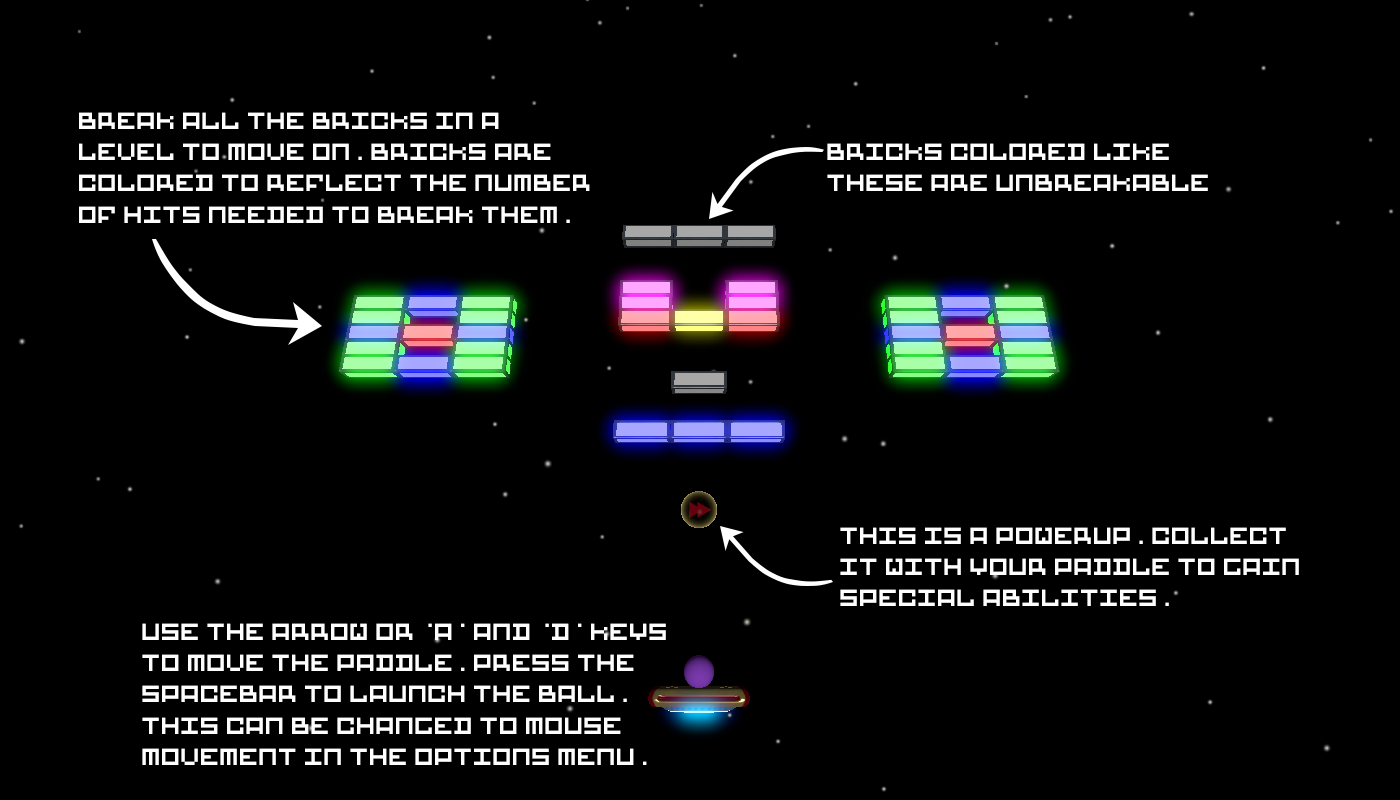
<style>
.page{position:relative;width:1400px;height:800px;background:#000000}
.page>*{position:absolute;margin:0}
.t1{font:26px "BIGBLOCKS";color:#fefefe}
</style>
<div class="page">
<p class="t1" style="left:79px;top:112px;width:511px;height:111px">BREAK ALL THE BRICKS IN A LEVEL TO MOVE ON. BRICKS ARE COLORED TO REFLECT THE NUMBER OF HITS NEEDED TO BREAK THEM.</p>
<p class="t1" style="left:827px;top:143px;width:381px;height:48px">BRICKS COLORED LIKE THESE ARE UNBREAKABLE</p>
<p class="t1" style="left:840px;top:527px;width:459px;height:79px">THIS IS A POWERUP. COLLECT IT WITH YOUR PADDLE TO GAIN SPECIAL ABILITIES.</p>
<p class="t1" style="left:142px;top:623px;width:524px;height:142px">USE THE ARROW OR ‘A’ AND ‘D’ KEYS TO MOVE THE PADDLE. PRESS THE SPACEBAR TO LAUNCH THE BALL. THIS CAN BE CHANGED TO MOUSE MOVEMENT IN THE OPTIONS MENU.</p>
</div>
